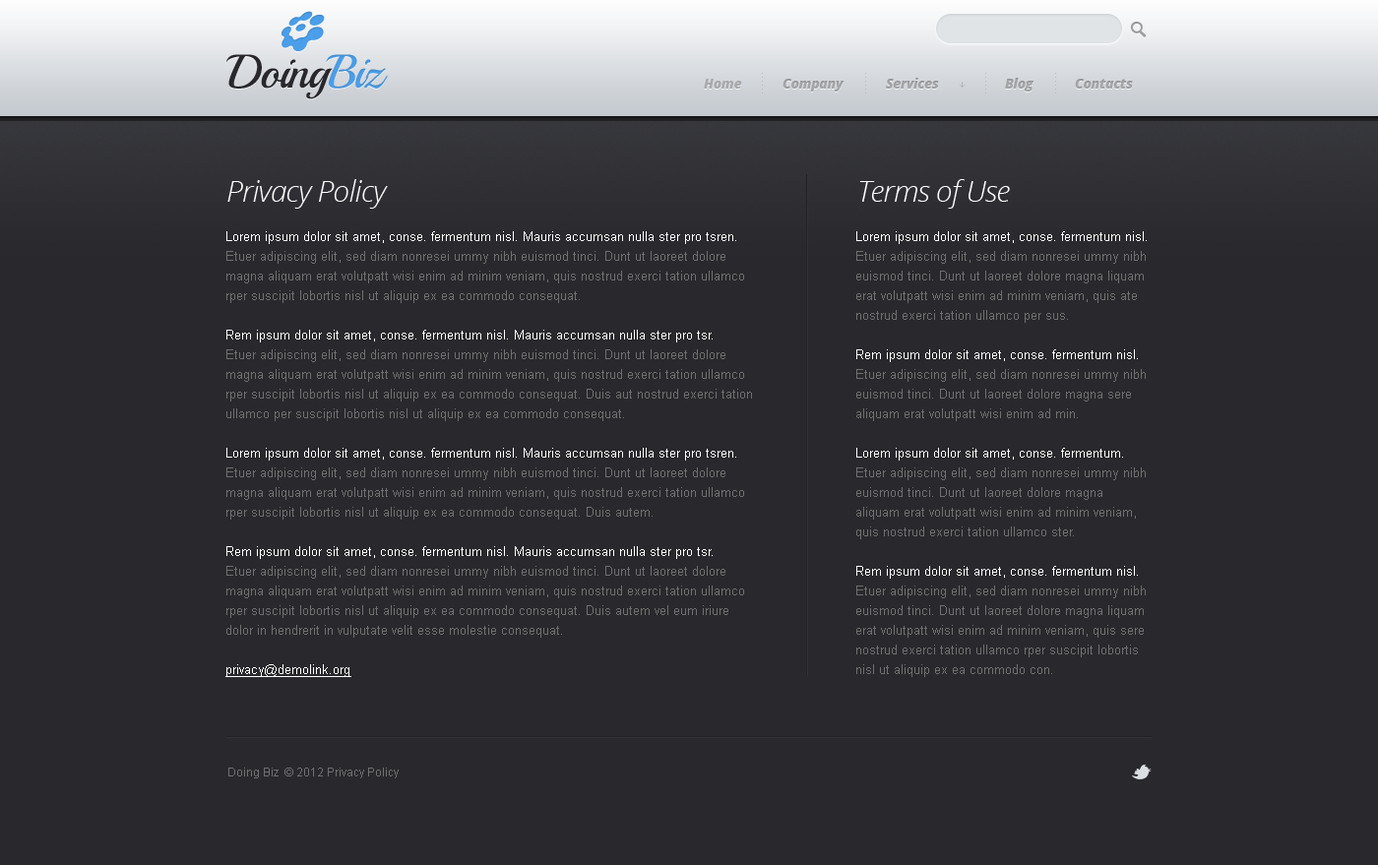
<style>
.page{position:relative;width:1378px;height:865px;background:#29292d}
.page>*{position:absolute;margin:0}
.t1{font:47.2px "Playball-Regular";letter-spacing:-0.025em;color:#29292d}
.t2{font:47.2px "Playball-Regular";letter-spacing:-0.025em;color:#4a9eea}
.t3{font:13.8px "OpenSans-ExtraboldItalic";letter-spacing:-0.025em;color:#a8a9ab}
.t4{font:29.5px "OpenSansLight-Italic";letter-spacing:-0.025em;color:#ffffff}
.t5{font:12.8px/19.7px "ArialMT";color:#707070}
.t6{font:12.8px/19.7px "ArialMT";color:#ffffff}
.t7{font:12.8px/19.7px "ArialMT";color:#ffffff;text-decoration:underline}
.t8{font:11.8px "ArialMT";color:#707070}
</style>
<div class="page">
<p class="t1" style="left:226px;top:54px;width:162px;height:45px">Doing<span class="t2">Biz</span></p>
<p class="t3" style="left:886px;top:78px;width:53px;height:11px">Services</p>
<p class="t3" style="left:1005px;top:78px;width:30px;height:14px">Blog</p>
<p class="t3" style="left:704px;top:79px;width:38px;height:10px">Home</p>
<p class="t3" style="left:783px;top:79px;width:62px;height:13px">Company</p>
<p class="t3" style="left:1075px;top:79px;width:58px;height:10px">Contacts</p>
<p class="t4" style="left:227px;top:179px;width:161px;height:30px">Privacy Policy</p>
<p class="t4" style="left:859px;top:179px;width:151px;height:30px">Terms of Use</p>
<p class="t5" style="left:225px;top:231px;width:527px;height:446px"><span class="t6">Lorem ipsum dolor sit amet, conse. fermentum nisl. Mauris accumsan nulla ster pro tsren.<br></span>Etuer adipiscing elit, sed diam nonresei ummy nibh euismod tinci. Dunt ut laoreet dolore magna aliquam erat volutpatt wisi enim ad minim veniam, quis nostrud exerci tation ullamco<br>rper suscipit lobortis nisl ut aliquip ex ea commodo consequat. <br><br><span class="t6">Rem ipsum dolor sit amet, conse. fermentum nisl. Mauris accumsan nulla ster pro tsr.<br></span>Etuer adipiscing elit, sed diam nonresei ummy nibh euismod tinci. Dunt ut laoreet dolore magna aliquam erat volutpatt wisi enim ad minim veniam, quis nostrud exerci tation ullamco<br>rper suscipit lobortis nisl ut aliquip ex ea commodo consequat. Duis aut nostrud exerci tation ullamco per suscipit lobortis nisl ut aliquip ex ea commodo consequat. <br><br><span class="t6">Lorem ipsum dolor sit amet, conse. fermentum nisl. Mauris accumsan nulla ster pro tsren.<br></span>Etuer adipiscing elit, sed diam nonresei ummy nibh euismod tinci. Dunt ut laoreet dolore magna aliquam erat volutpatt wisi enim ad minim veniam, quis nostrud exerci tation ullamco<br>rper suscipit lobortis nisl ut aliquip ex ea commodo consequat. Duis autem.<br><br><span class="t6">Rem ipsum dolor sit amet, conse. fermentum nisl. Mauris accumsan nulla ster pro tsr.<br></span>Etuer adipiscing elit, sed diam nonresei ummy nibh euismod tinci. Dunt ut laoreet dolore magna aliquam erat volutpatt wisi enim ad minim veniam, quis nostrud exerci tation ullamco<br>rper suscipit lobortis nisl ut aliquip ex ea commodo consequat. Duis autem vel eum iriure dolor in hendrerit in vulputate velit esse molestie consequat.<br><br><span class="t7">privacy@demolink.org</span></p>
<p class="t5" style="left:856px;top:231px;width:291px;height:446px"><span class="t6">Lorem ipsum dolor sit amet, conse. fermentum nisl. <br></span>Etuer adipiscing elit, sed diam nonresei ummy nibh euismod tinci. Dunt ut laoreet dolore magna liquam erat volutpatt wisi enim ad minim veniam, quis ate nostrud exerci tation ullamco per sus.<br><br><span class="t6">Rem ipsum dolor sit amet, conse. fermentum nisl. </span>Etuer adipiscing elit, sed diam nonresei ummy nibh euismod tinci. Dunt ut laoreet dolore magna sere aliquam erat volutpatt wisi enim ad min.<br><br><span class="t6">Lorem ipsum dolor sit amet, conse. fermentum.<br></span>Etuer adipiscing elit, sed diam nonresei ummy nibh euismod tinci. Dunt ut laoreet dolore magna aliquam erat volutpatt wisi enim ad minim veniam, quis nostrud exerci tation ullamco ster.<br><br><span class="t6">Rem ipsum dolor sit amet, conse. fermentum nisl. <br></span>Etuer adipiscing elit, sed diam nonresei ummy nibh euismod tinci. Dunt ut laoreet dolore magna liquam erat volutpatt wisi enim ad minim veniam, quis sere nostrud exerci tation ullamco rper suscipit lobortis nisl ut aliquip ex ea commodo con.<br>sequat. Duis autem vel eum iriure dolor in hendrerit in vulputate velit esse molestie consequat.<br><br><span class="t7">privacy@demolink.org</span></p>
<p class="t8" style="left:228px;top:768px;width:171px;height:11px">Doing Biz  © 2012 Privacy Policy</p>
</div>
